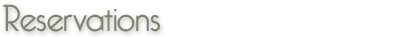
<style>
.page{position:relative;width:400px;height:37px;background:#ffffff}
.page>*{position:absolute;margin:0}
.t1{font:36.8px "BelleroseLight";color:#7c836c}
</style>
<div class="page">
<p class="t1" style="left:2px;top:4px;width:158px;height:28px">Reservations</p>
</div>
